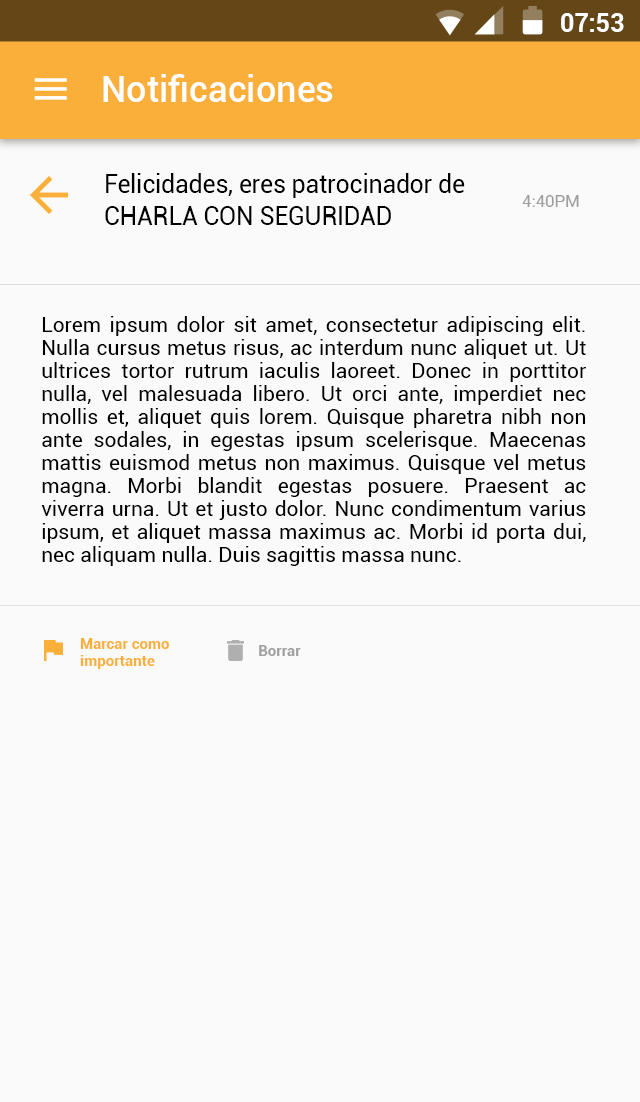
<style>
.page{position:relative;width:640px;height:1102px;background:#fafafa}
.page>*{position:absolute;margin:0}
.t1{font:24.9px "Roboto-Bold";color:#ffffff}
.t2{font:35.8px "Roboto-Medium";letter-spacing:0.005em;color:#ffffff}
.t3{font:25px/31.2px "Roboto-Regular";letter-spacing:-0.01em;color:#000000}
.t4{font:16.7px "Roboto-Regular";color:#9f9f9f}
.t5{font:21px/23px "Roboto-Regular";color:#000000}
.t6{font:14.8px/16.9px "Roboto-Bold";letter-spacing:0.01em;color:#faaf3a}
.t7{font:14.8px "Roboto-Bold";letter-spacing:0.01em;color:#9f9f9f}
</style>
<div class="page">
<p class="t1" style="left:561px;top:13px;width:63px;height:19px">07:53</p>
<p class="t2" style="left:103px;top:74px;width:230px;height:28px">Notificaciones</p>
<p class="t3" style="left:105px;top:173px;width:360px;height:52px">Felicidades, eres patrocinador de <br>CHARLA CON SEGURIDAD</p>
<p class="t4" style="left:522px;top:195px;width:57px;height:12px">4:40PM</p>
<p class="t5" style="left:41px;top:316px;width:545px;height:250px;text-align:justify">Lorem ipsum dolor sit amet, consectetur adipiscing elit. Nulla cursus metus risus, ac interdum nunc aliquet ut. Ut ultrices tortor rutrum iaculis laoreet. Donec in porttitor nulla, vel malesuada libero. Ut orci ante, imperdiet nec mollis et, aliquet quis lorem. Quisque pharetra nibh non ante sodales, in egestas ipsum scelerisque. Maecenas mattis euismod metus non maximus. Quisque vel metus magna. Morbi blandit egestas posuere. Praesent ac viverra urna. Ut et justo dolor. Nunc condimentum varius ipsum, et aliquet massa maximus ac. Morbi id porta dui, nec aliquam nulla. Duis sagittis massa nunc.</p>
<p class="t6" style="left:80px;top:638px;width:89px;height:31px">Marcar como <br>importante</p>
<p class="t7" style="left:259px;top:645px;width:42px;height:11px">Borrar</p>
</div>
